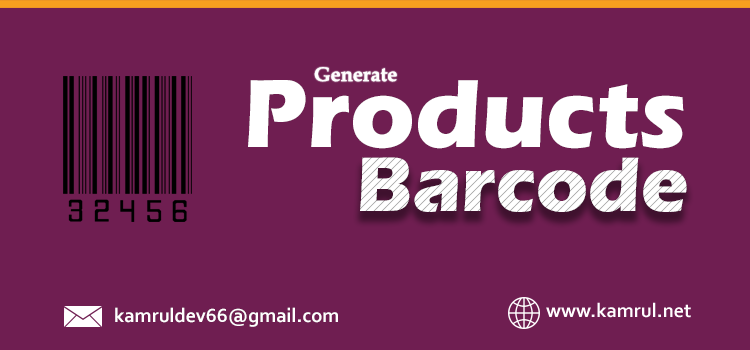
<style>
.page{position:relative;width:750px;height:350px;background:#6f1e51}
.page>*{position:absolute;margin:0}
.t1{font:20px "BookAntiqua-Bold";color:#ffffff}
.t2{font:100px "ErasITC-Bold";color:#ffffff}
.t3{font:80px "ErasITC-Bold";color:#ffffff}
.t4{font:20px "Corbel-Bold";color:#ffffff}
</style>
<div class="page">
<p class="t1" style="left:314px;top:67px;width:83px;height:15px">Generate</p>
<p class="t2" style="left:248px;top:80px;width:436px;height:69px">Products</p>
<p class="t3" style="left:360px;top:157px;width:327px;height:55px">Barcode</p>
<p class="t4" style="left:115px;top:307px;width:223px;height:20px">kamruldev66@gmail.com</p>
</div>
